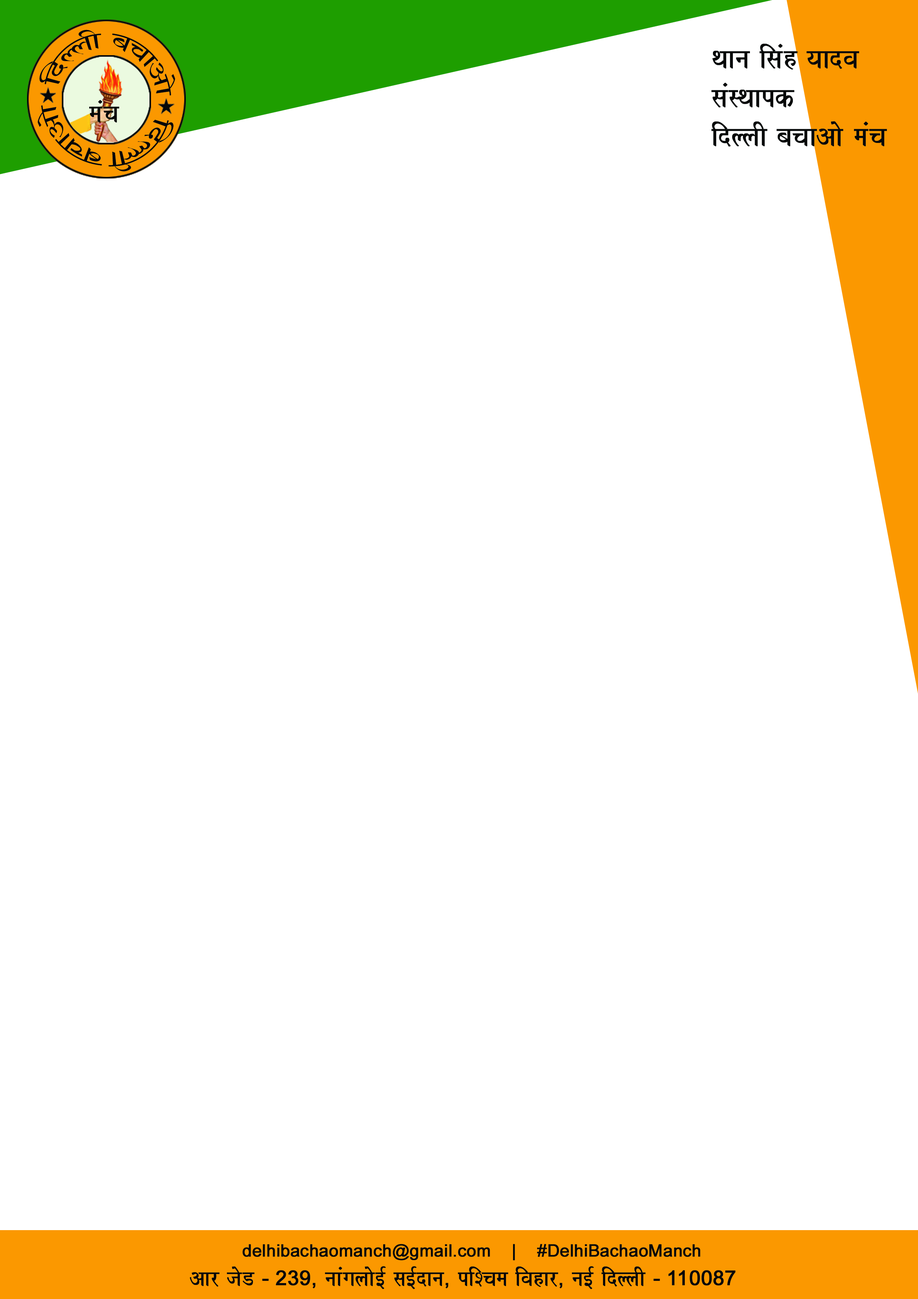
<style>
.page{position:relative;width:918px;height:1299px;background:#ffffff}
.page>*{position:absolute;margin:0}
.t1{font:29.5px "Shusha";color:#060808}
.t2{font:32.4px "Shusha";color:#060808;font-weight:bold}
.t3{font:29.5px "Shusha";color:#060808;font-weight:bold}
.t4{font:17px "ArialMT";color:#060808;font-weight:bold}
.t5{font:25.5px "Shusha";color:#060808;font-weight:bold}
.t6{font:20.4px "ArialMT";color:#060808;font-weight:bold}
</style>
<div class="page">
<p class="t1" style="left:39px;top:30px;width:62px;height:54px;rotate:-42deg">idllaI</p>
<p class="t1" style="left:112px;top:33px;width:63px;height:63px;rotate:46deg">bacaaAao</p>
<p class="t2" style="left:712px;top:44px;width:175px;height:103px">qaana isaMh yaadva<br>saMsqaapk<br>idllaI bacaaAao maMca</p>
<p class="t3" style="left:89px;top:100px;width:30px;height:23px">maMca</p>
<p class="t1" style="left:38px;top:105px;width:64px;height:60px;rotate:-136deg">bacaaAao</p>
<p class="t1" style="left:108px;top:120px;width:66px;height:51px;rotate:143deg">idllaI</p>
<p class="t4" style="left:242px;top:1244px;width:458px;height:16px">delhibachaomanch@gmail.com    |    #DelhiBachaoManch</p>
<p class="t5" style="left:190px;top:1266px;width:546px;height:23px">Aar jaoD <span class="t6">- 239,</span> naaMgalaao[- sa[-dana<span class="t6">,</span> piScama ivahar<span class="t6">,</span> na[- idllaI <span class="t6">- 110087</span></p>
</div>
